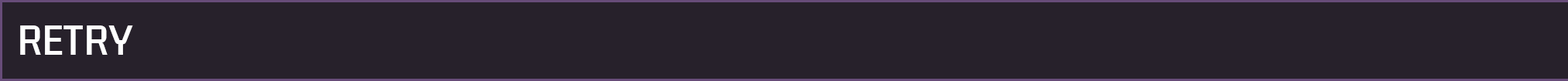
<style>
.page{position:relative;width:1568px;height:81px;background:#27212b}
.page>*{position:absolute;margin:0}
.t1{font:37.1px "KdamThmorPro-Regular";color:#ffffff}
</style>
<div class="page">
<p class="t1" style="left:20px;top:26px;width:113px;height:29px">RETRY</p>
</div>
